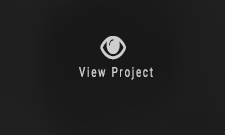
<style>
.page{position:relative;width:225px;height:135px}
.page>*{position:absolute;margin:0}
.t1{font:13.3px "Roboto-Regular";letter-spacing:0.18em;color:#cdcdcd;font-weight:bold;scale:0.71 1}
</style>
<div class="page">
<p class="t1" style="left:79px;top:67px;width:74px;height:13px">View Project</p>
</div>
